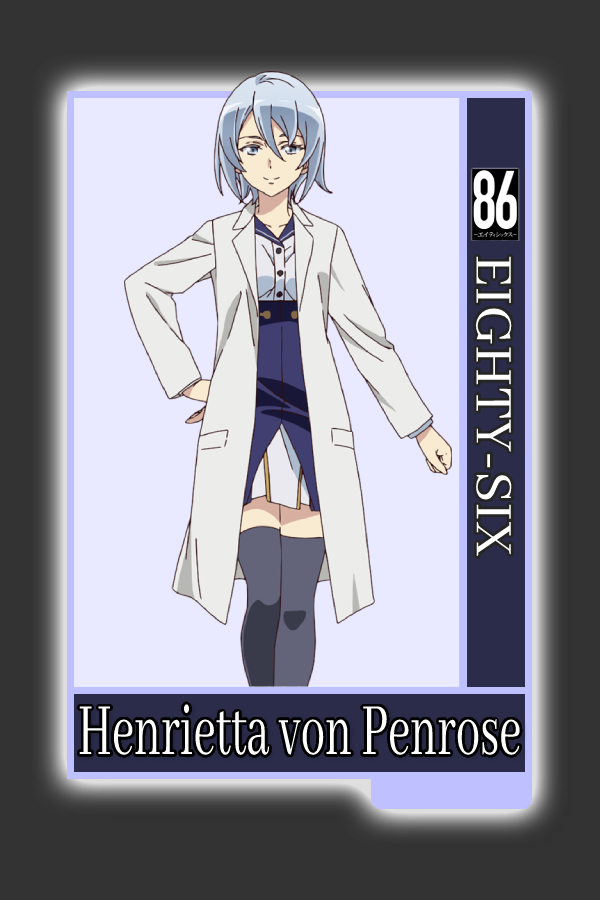
<style>
.page{position:relative;width:600px;height:900px;background:#e9e9ff}
.page>*{position:absolute;margin:0}
.t1{font:58.2px "AbhayaLibre-Regular";color:#ffffff}
.t2{font:81.2px "AbhayaLibre-Regular";color:#ffffff;scale:0.6 1}
</style>
<div class="page">
<p class="t1" style="left:476px;top:256px;width:36px;height:300px;rotate:90deg">EIGHTY-SIX</p>
<p class="t2" style="left:79px;top:704px;width:441px;height:51px">Henrietta von Penrose</p>
</div>
